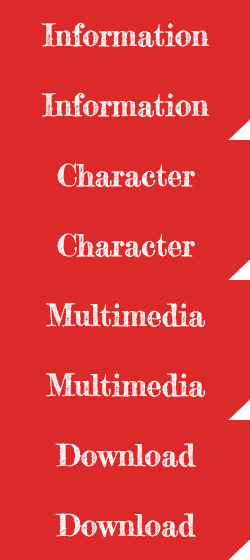
<style>
.page{position:relative;width:250px;height:560px;background:#dc2929}
.page>*{position:absolute;margin:0}
.t1{font:30px "FrederickatheGreat-Regular";color:#ffffff}
</style>
<div class="page">
<p class="t1" style="left:41px;top:22px;width:169px;height:26px">Information</p>
<p class="t1" style="left:41px;top:92px;width:169px;height:26px">Information</p>
<p class="t1" style="left:57px;top:163px;width:138px;height:25px">Character</p>
<p class="t1" style="left:57px;top:233px;width:138px;height:25px">Character</p>
<p class="t1" style="left:46px;top:303px;width:159px;height:25px">Multimedia</p>
<p class="t1" style="left:46px;top:373px;width:159px;height:25px">Multimedia</p>
<p class="t1" style="left:55px;top:443px;width:141px;height:25px">Download</p>
<p class="t1" style="left:55px;top:513px;width:141px;height:25px">Download</p>
</div>
